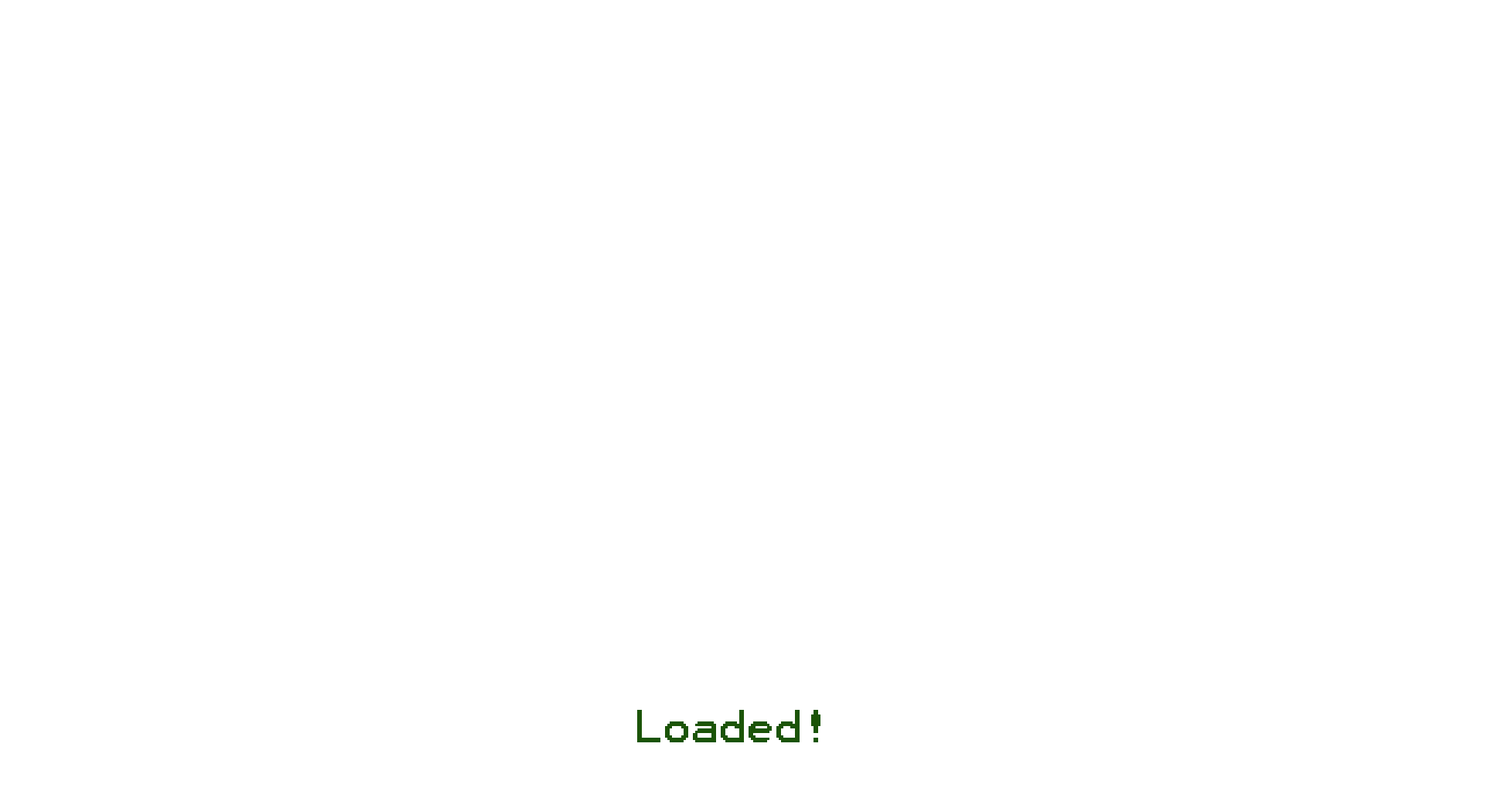
<style>
.page{position:relative;width:1494px;height:798px;background:#ffffff}
.page>*{position:absolute;margin:0}
.t1{font:37.1px "Terminal";color:#1b5407}
</style>
<div class="page">
<p class="t1" style="left:637px;top:710px;width:184px;height:32px">Loaded!</p>
</div>
